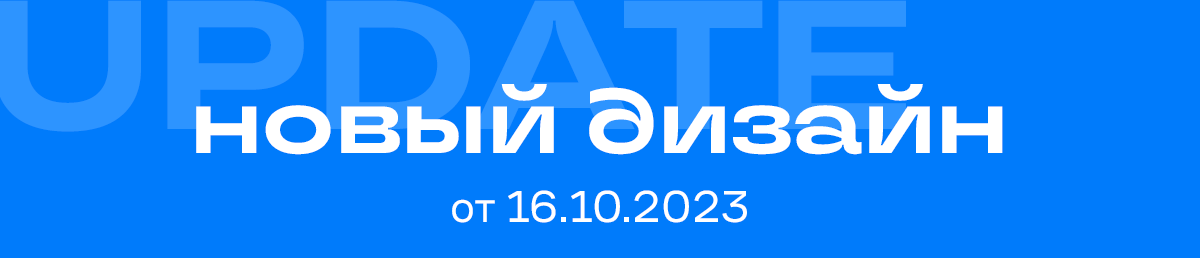
<style>
.page{position:relative;width:1200px;height:258px;background:#007bfb}
.page>*{position:absolute;margin:0}
.t1{font:91.5px "TTTravelsNext-Bd";color:#ffffff}
.t2{font:45.8px "CoFoSans-Regular";color:#ffffff}
</style>
<div class="page">
<p class="t1" style="left:196px;top:84px;width:807px;height:71px">новый дизайн</p>
<p class="t2" style="left:452px;top:190px;width:295px;height:33px">от 16.10.2023</p>
</div>
